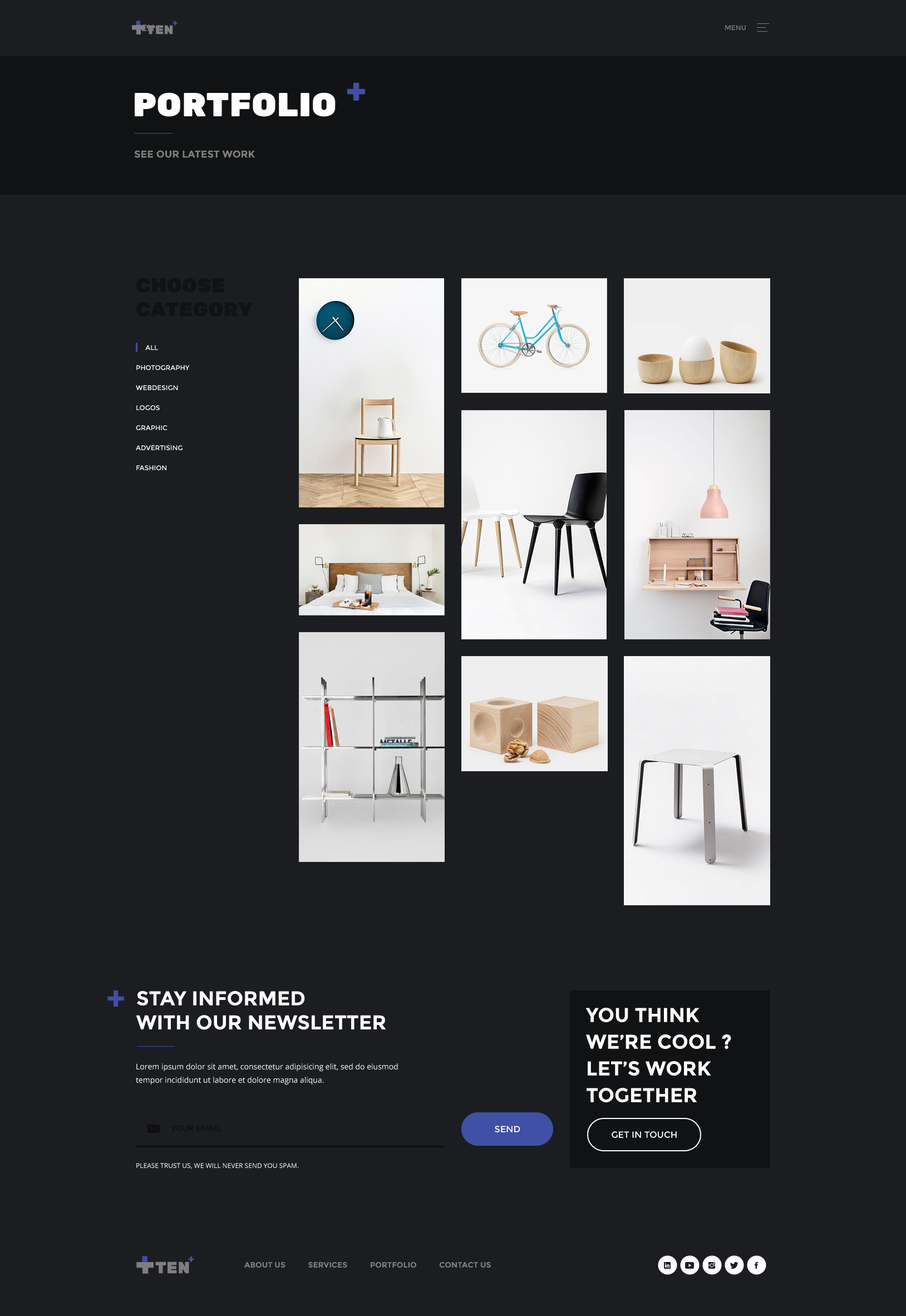
<style>
.page{position:relative;width:906px;height:1316px;background:#1c1d20}
.page>*{position:absolute;margin:0}
.t1{font:8.9px "Montserrat-Regular";color:#7f7f7f;text-transform:uppercase}
.t2{font:12.7px "RubikOne-Regular";color:#7e7e7e;text-transform:uppercase}
.t3{font:8.2px "RubikOne-Regular";color:#3f50a5;text-transform:uppercase}
.t4{font:6.7px "Montserrat-Regular";color:#7f7f7f;text-transform:uppercase}
.t5{font:33.4px "RubikOne-Regular";color:#3f50a5;text-transform:uppercase}
.t6{font:33.4px "RubikOne-Regular";color:#fefefe;text-transform:uppercase}
.t7{font:10px "Montserrat-Bold";color:#808080;text-transform:uppercase}
.t8{font:20px "RubikOne-Regular";color:#111213;text-transform:uppercase}
.t9{font:6.7px/20px "Montserrat-Regular";color:#ffffff;text-transform:uppercase}
.t10{font:6.7px/20px "Montserrat-Regular";color:#1c1d20;text-transform:uppercase}
.t11{font:33.4px "Montserrat-Bold";color:#3f50a5;text-transform:uppercase}
.t12{font:20px "Montserrat-Bold";color:#ffffff;text-transform:uppercase}
.t13{font:20px/26.7px "Montserrat-Bold";color:#ffffff;text-transform:uppercase}
.t14{font:7.8px/13.4px "OpenSans";color:#ffffff}
.t15{font:7.8px "Montserrat-Regular";color:#000000;text-transform:uppercase}
.t16{font:8.9px "Montserrat-Regular";color:#ffffff;text-transform:uppercase}
.t17{font:6.7px "OpenSans";color:#ffffff;text-transform:uppercase}
.t18{font:16.2px "RubikOne-Regular";color:#7e7e7e;text-transform:uppercase}
.t19{font:10.6px "RubikOne-Regular";color:#3f50a5;text-transform:uppercase}
.t20{font:7.8px "Montserrat-Bold";color:#7f7f7f;text-transform:uppercase}
</style>
<div class="page">
<p class="t1" style="left:136px;top:24px;width:23px;height:7px">ten+</p>
<p class="t2" style="left:146px;top:25px;width:27px;height:10px">ten</p>
<p class="t3" style="left:173px;top:21px;width:5px;height:5px">+</p>
<p class="t4" style="left:725px;top:25px;width:21px;height:5px">menu</p>
<p class="t5" style="left:347px;top:82px;width:18px;height:19px">+</p>
<p class="t6" style="left:135px;top:92px;width:201px;height:25px">portfolio</p>
<p class="t7" style="left:134px;top:150px;width:121px;height:8px">see our latest work</p>
<p class="t8" style="left:136px;top:278px;width:117px;height:39px">choose<br>category</p>
<p class="t9" style="left:136px;top:345px;width:54px;height:125px"><span class="t10">__</span>all<br>photography<br>webdesign<br>logos<br>graphic<br>advertising<br>fashion</p>
<p class="t11" style="left:107px;top:991px;width:17px;height:16px">+</p>
<p class="t12" style="left:136px;top:991px;width:250px;height:39px">stay informed<br>with our newsletter</p>
<p class="t13" style="left:585px;top:1008px;width:146px;height:94px">you think we’re cool ? <br>let’s work together</p>
<p class="t14" style="left:136px;top:1063px;width:262px;height:22px">Lorem ipsum dolor sit amet, consectetur adipisicing elit, sed do eiusmod<br>tempor incididunt ut labore et dolore magna aliqua.</p>
<p class="t15" style="left:171px;top:1125px;width:50px;height:6px;opacity:0.5">Your email</p>
<p class="t16" style="left:495px;top:1126px;width:25px;height:7px">send</p>
<p class="t16" style="left:612px;top:1131px;width:65px;height:7px">get in touch</p>
<p class="t17" style="left:136px;top:1163px;width:163px;height:6px">Please trust us, we will never send you spam.</p>
<p class="t18" style="left:155px;top:1262px;width:34px;height:12px">ten</p>
<p class="t19" style="left:188px;top:1257px;width:6px;height:5px">+</p>
<p class="t20" style="left:244px;top:1262px;width:247px;height:6px">about us           services           portfolio           contact us</p>
</div>
